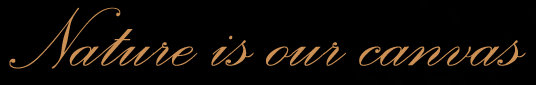
<style>
.page{position:relative;width:536px;height:85px;background:#000000}
.page>*{position:absolute;margin:0}
.t1{font:108.3px "PalaceScriptMT";color:#cc9054}
</style>
<div class="page">
<p class="t1" style="left:9px;top:7px;width:517px;height:62px">Nature is our canvas</p>
</div>
